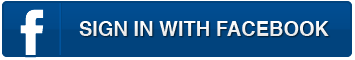
<style>
.page{position:relative;width:355px;height:60px;background:#01437d}
.page>*{position:absolute;margin:0}
.t1{font:20px "Helvetica-Bold";color:#ffffff;text-transform:uppercase}
</style>
<div class="page">
<p class="t1" style="left:79px;top:21px;width:250px;height:15px">sign in with Facebook</p>
</div>
